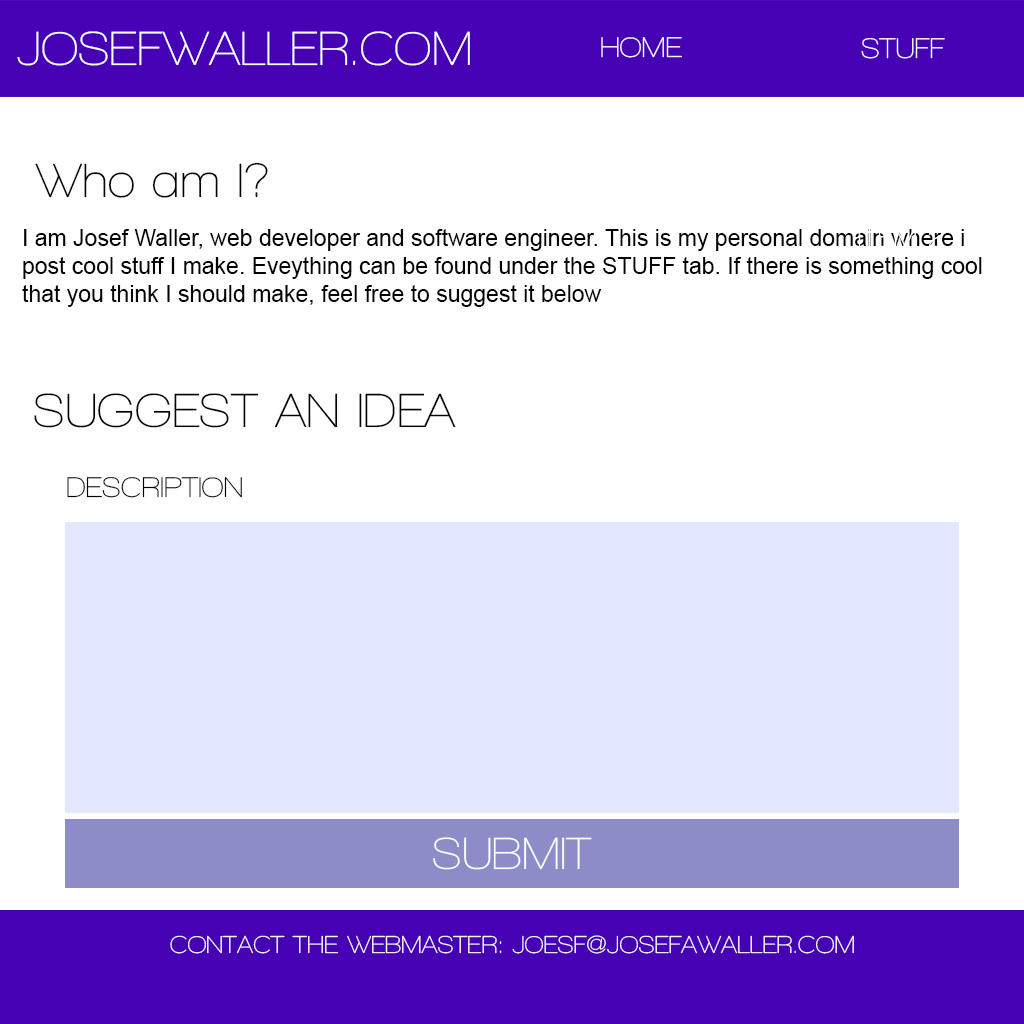
<style>
.page{position:relative;width:1024px;height:1024px;background:#ffffff}
.page>*{position:absolute;margin:0}
.t1{font:49px "WalkwaySemiBold";color:#ffffff;text-transform:uppercase}
.t2{font:29px "WalkwaySemiBold";color:#ffffff;text-transform:uppercase}
.t3{font:49px "WalkwaySemiBold";color:#020202}
.t4{font:23px "ArialMT";color:#020202}
.t5{font:49px "WalkwaySemiBold";color:#010101;text-transform:uppercase}
.t6{font:29px "WalkwaySemiBold";color:#000000;text-transform:uppercase}
.t7{font:46px "WalkwaySemiBold";color:#ffffff;text-transform:uppercase}
.t8{font:25px "WalkwaySemiBold";color:#ffffff;text-transform:uppercase}
</style>
<div class="page">
<p class="t1" style="left:17px;top:31px;width:453px;height:35px">Josefwaller.com</p>
<p class="t2" style="left:601px;top:37px;width:81px;height:21px">Home</p>
<p class="t2" style="left:861px;top:38px;width:84px;height:21px">Stuff</p>
<p class="t3" style="left:35px;top:162px;width:233px;height:36px">Who am I?</p>
<p class="t4" style="left:22px;top:229px;width:960px;height:78px">I am Josef Waller, web developer and software engineer. This is my personal domain where i post cool stuff I make. Eveything can be found under the STUFF tab. If there is something cool that you think I should make, feel free to suggest it below</p>
<p class="t5" style="left:34px;top:393px;width:422px;height:35px">Suggest an idea</p>
<p class="t6" style="left:67px;top:477px;width:175px;height:21px">Description</p>
<p class="t7" style="left:433px;top:837px;width:159px;height:33px">Submit</p>
<p class="t8" style="left:170px;top:935px;width:684px;height:19px">Contact the webmaster: joesf@josefawaller.com</p>
</div>
